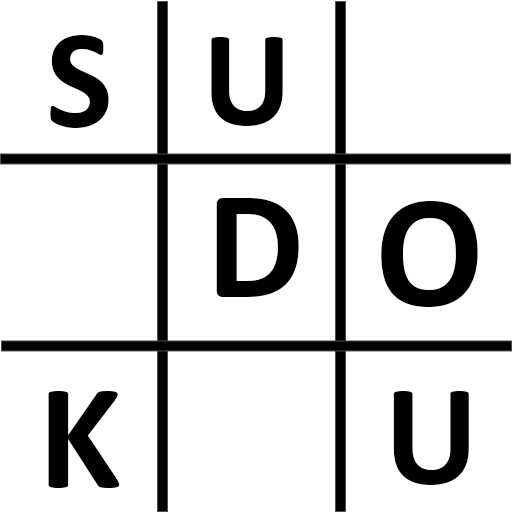
<style>
.page{position:relative;width:512px;height:512px;background:#ffffff}
.page>*{position:absolute;margin:0}
.t1{font:141.2px "Calibri-Bold";color:#000000}
.t2{font:138.3px "Calibri-Bold";color:#000000}
.t3{font:156.1px "Calibri-Bold";color:#000000}
.t4{font:161.4px "Calibri-Bold";color:#000000}
.t5{font:153.5px "Calibri-Bold";color:#000000}
.t6{font:144.9px "Calibri-Bold";color:#000000}
</style>
<div class="page">
<p class="t1" style="left:50px;top:35px;width:59px;height:93px">S</p>
<p class="t2" style="left:211px;top:37px;width:72px;height:89px">U</p>
<p class="t3" style="left:216px;top:198px;width:83px;height:99px">D</p>
<p class="t4" style="left:381px;top:201px;width:97px;height:106px">O</p>
<p class="t5" style="left:48px;top:391px;width:72px;height:97px">K</p>
<p class="t6" style="left:393px;top:391px;width:76px;height:94px">U</p>
</div>
